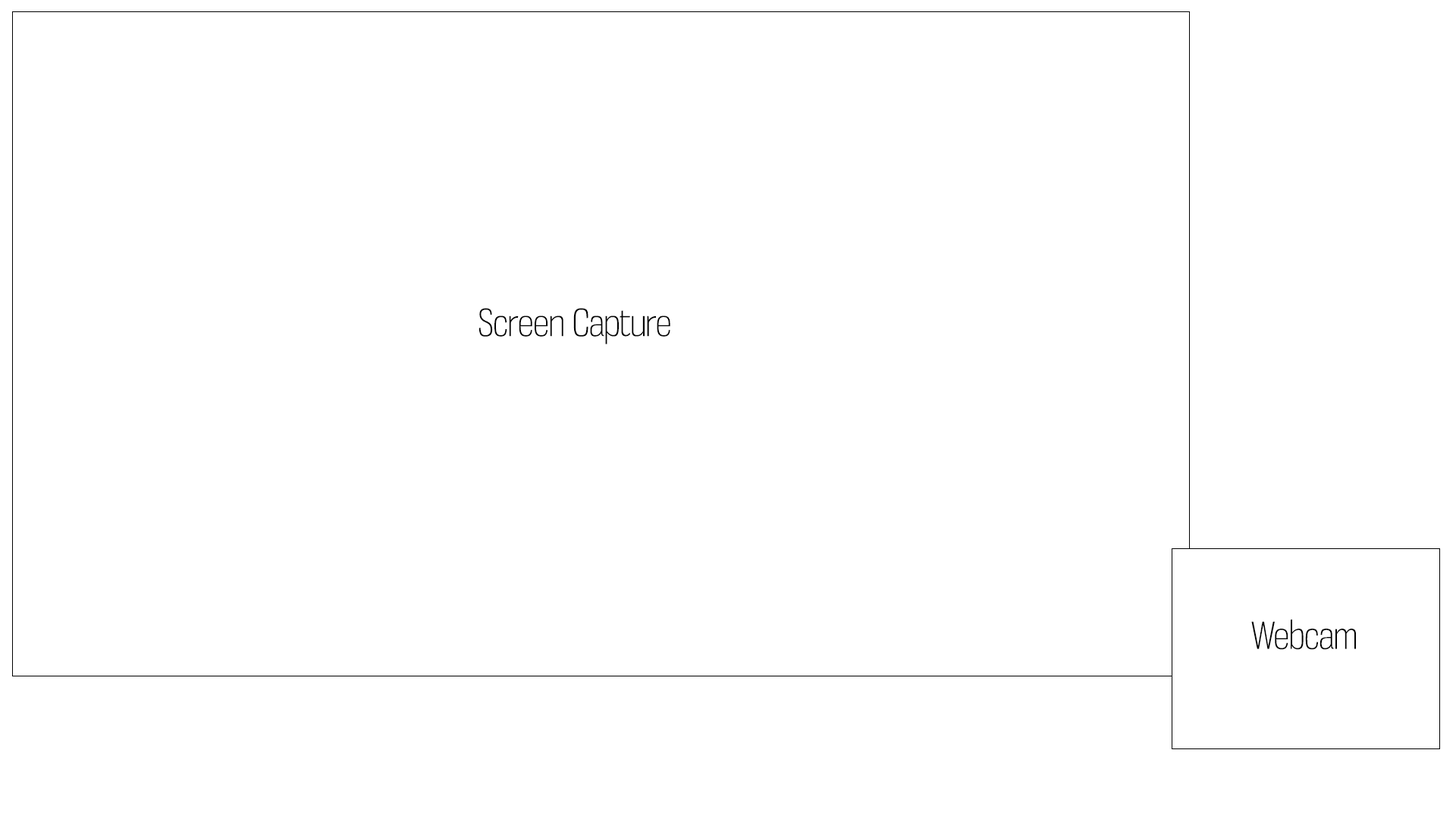
<style>
.page{position:relative;width:1456px;height:819px;background:#ffffff}
.page>*{position:absolute;margin:0}
.t1{font:36.4px "GnuolaneXl-Regular";color:#000000}
</style>
<div class="page">
<p class="t1" style="left:479px;top:308px;width:191px;height:36px">Screen Capture</p>
<p class="t1" style="left:1251px;top:619px;width:105px;height:31px">Webcam</p>
</div>
